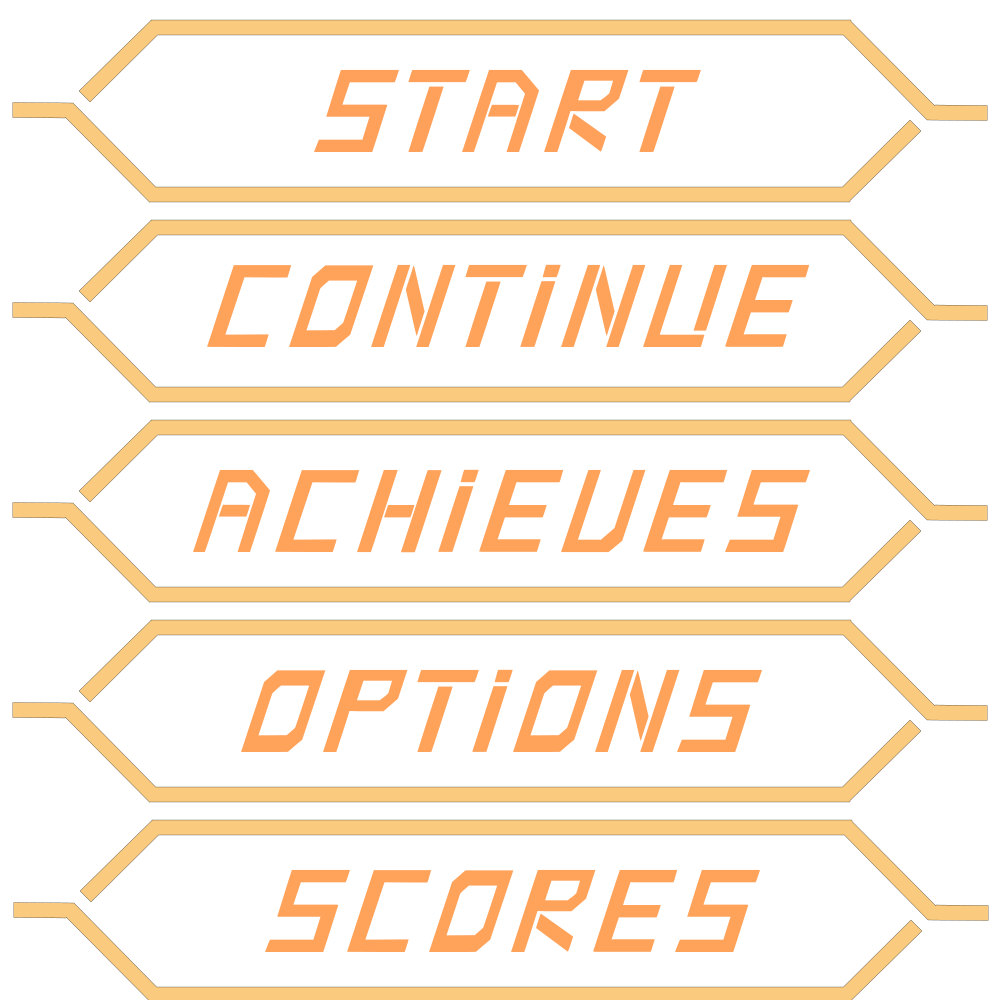
<style>
.page{position:relative;width:1000px;height:1000px;background:#ffffff}
.page>*{position:absolute;margin:0}
.t1{font:105px "NewTest";color:#ffa25a;font-style:italic}
</style>
<div class="page">
<p class="t1" style="left:314px;top:69px;width:387px;height:83px">START</p>
<p class="t1" style="left:207px;top:264px;width:603px;height:83px">CONTINUE</p>
<p class="t1" style="left:193px;top:469px;width:617px;height:84px">ACHIEVES</p>
<p class="t1" style="left:241px;top:669px;width:521px;height:83px">OPTIONS</p>
<p class="t1" style="left:265px;top:869px;width:495px;height:83px">SCORES</p>
</div>
